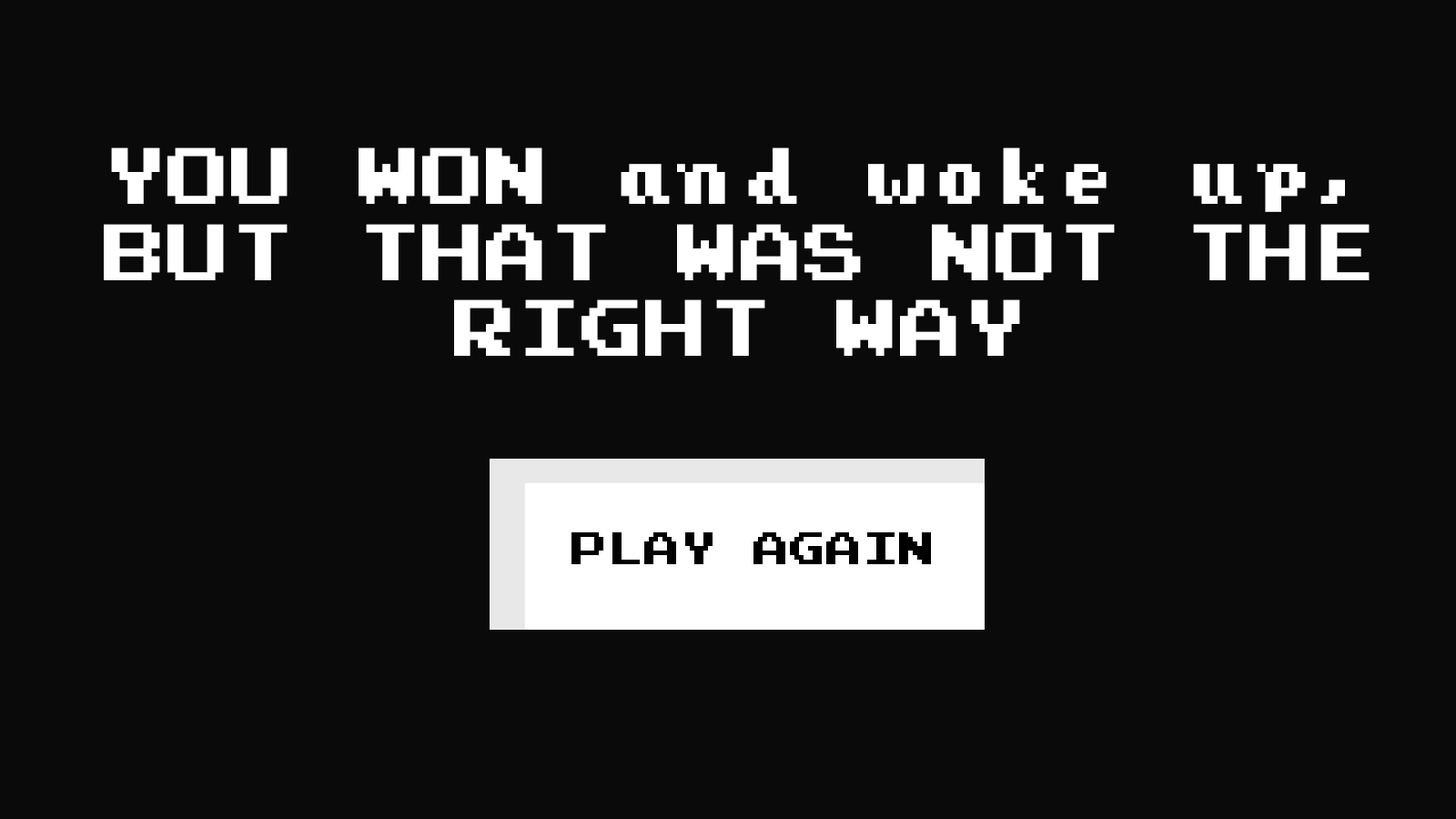
<style>
.page{position:relative;width:1456px;height:819px;background:#0a0a0a}
.page>*{position:absolute;margin:0}
.t1{font:63.7px "PressStartReg";color:#ffffff}
.t2{font:36.4px "PressStartReg";color:#000000}
</style>
<div class="page">
<p class="t1" style="left:104px;top:147px;width:1266px;height:209px;text-align:center">YOU WON and woke up, BUT THAT WAS NOT THE RIGHT WAY</p>
<p class="t2" style="left:571px;top:532px;width:360px;height:32px">PLAY AGAIN</p>
</div>
